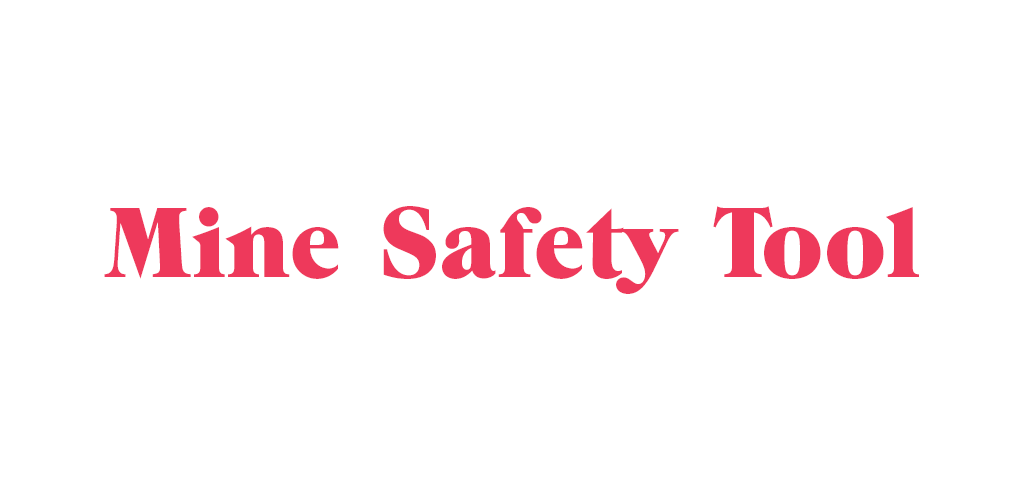
<style>
.page{position:relative;width:1024px;height:500px;background:#ffffff}
.page>*{position:absolute;margin:0}
.t1{font:100px "GrouchITCbyBT-Regular";color:#ee395b}
</style>
<div class="page">
<p class="t1" style="left:104px;top:206px;width:815px;height:88px">Mine Safety Tool</p>
</div>
